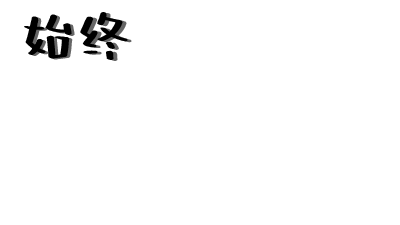
<style>
.page{position:relative;width:400px;height:225px;background:#ffffff}
.page>*{position:absolute;margin:0}
.t1{font:55.6px "FZZJ-QNTJW--GB1-0";color:#000000}
.t2{font:55.6px "FZZJ-QNTJW--GB1-0"}
</style>
<div class="page">
<p class="t1" style="left:24px;top:12px;width:104px;height:48px">始终</p>
<p class="t2" style="left:27px;top:13px;width:105px;height:48px">始终</p>
</div>
